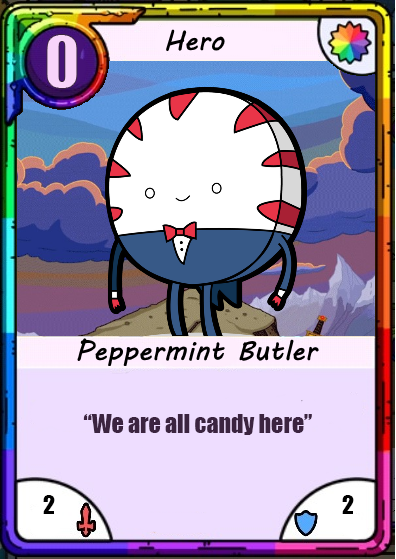
<style>
.page{position:relative;width:396px;height:559px}
.page>*{position:absolute;margin:0}
.t1{font:66.7px "Impact";color:#f8d4fa}
.t2{font:24px "Impact";color:#3b2440}
.t3{font:24px "Impact";color:#000000}
</style>
<div class="page">
<p class="t1" style="left:46px;top:34px;width:32px;height:55px">0</p>
<p class="t2" style="left:83px;top:414px;width:229px;height:21px">“We are all candy here”</p>
<p class="t3" style="left:43px;top:495px;width:12px;height:19px">2</p>
<p class="t3" style="left:342px;top:495px;width:12px;height:19px">2</p>
</div>
